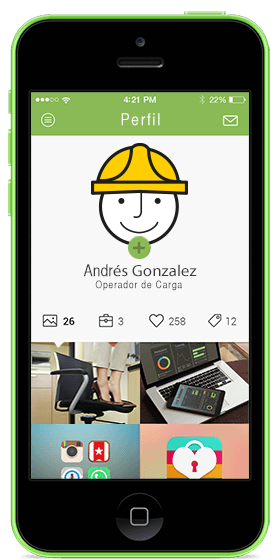
<style>
.page{position:relative;width:280px;height:560px;background:#f8f8f8}
.page>*{position:absolute;margin:0}
.t1{font:16px "HelveticaCYPlain";letter-spacing:0.1em;color:#ffffff;scale:1.05 1}
.t2{font:16px "MyriadPro-Regular";letter-spacing:0.005em;color:#39363c;scale:1.05 1}
.t3{font:16px "HelveticaCYPlain";letter-spacing:0.005em;color:#39363c;scale:1.05 1}
.t4{font:10px "HelveticaCYPlain";letter-spacing:0.075em;scale:1.05 1}
</style>
<div class="page">
<p class="t1" style="left:121px;top:113px;width:39px;height:13px">Perfil</p>
<p class="t2" style="left:83px;top:264px;width:114px;height:13px"><span class="t3">Andr</span>és Gonzalez</p>
<p class="t4" style="left:95px;top:280px;width:87px;height:11px">Operador de Carga</p>
</div>
